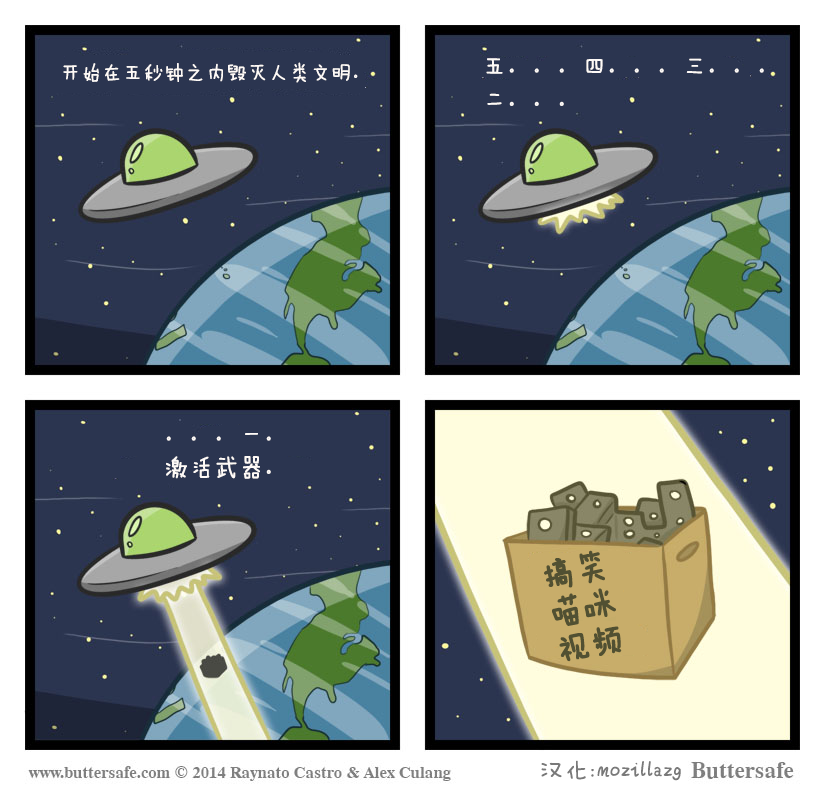
<style>
.page{position:relative;width:825px;height:800px;background:#2b3550}
.page>*{position:absolute;margin:0}
.t1{font:20.8px "FZMWJW--GB1-0";color:#fefaf7}
.t2{font:25px/33.3px "FZMWJW--GB1-0";color:#fefaf7}
.t3{font:33.3px/37.5px "FZMWJW--GB1-0";color:#515032;font-weight:bold}
.t4{font:25px "FZMWJW--GB1-0";color:#797979}
</style>
<div class="page">
<p class="t1" style="left:63px;top:62px;width:295px;height:21px">开始在五秒钟之内毁灭人类文明。</p>
<p class="t2" style="left:486px;top:58px;width:278px;height:48px">五。。。四。。。三。。。<br>二。。。</p>
<p class="t2" style="left:166px;top:433px;width:105px;height:46px">。。。一。<br>激活武器。</p>
<p class="t3" style="left:544px;top:550px;width:78px;height:112px;rotate:-12deg">搞笑<br>喵咪<br>视频</p>
<p class="t4" style="left:541px;top:760px;width:140px;height:21px">汉化:mozillazg</p>
</div>
